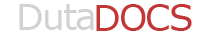
<style>
.page{position:relative;width:208px;height:34px;background:#ffffff}
.page>*{position:absolute;margin:0}
.t1{font:36px "Verdana";letter-spacing:-0.05em;color:#d2d2d2}
.t2{font:36px "Verdana";letter-spacing:-0.05em;color:#c33636}
</style>
<div class="page">
<p class="t1" style="left:19px;top:4px;width:75px;height:26px">Duta</p>
<p class="t2" style="left:96px;top:4px;width:96px;height:27px">DOCS</p>
</div>
